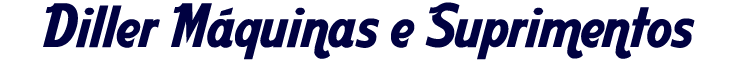
<style>
.page{position:relative;width:750px;height:60px;background:#ffffff}
.page>*{position:absolute;margin:0}
.t1{font:58.3px "AardvarkCafe";color:#000141}
</style>
<div class="page">
<p class="t1" style="left:43px;top:2px;width:652px;height:58px">Diller Máquinas e Suprimentos</p>
</div>
